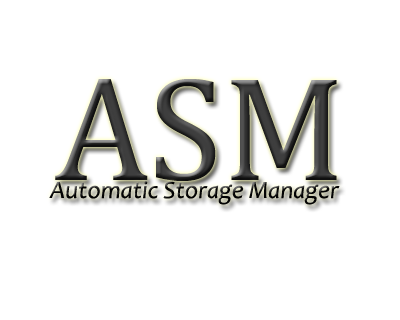
<style>
.page{position:relative;width:400px;height:320px;background:#ffffff}
.page>*{position:absolute;margin:0}
.t1{font:150px "CambriaMath";color:#3e3e3e}
.t2{font:25px "Candara-Italic";color:#060606}
</style>
<div class="page">
<p class="t1" style="left:55px;top:79px;width:282px;height:102px">ASM</p>
<p class="t2" style="left:49px;top:181px;width:291px;height:24px">Automatic Storage Manager</p>
</div>
